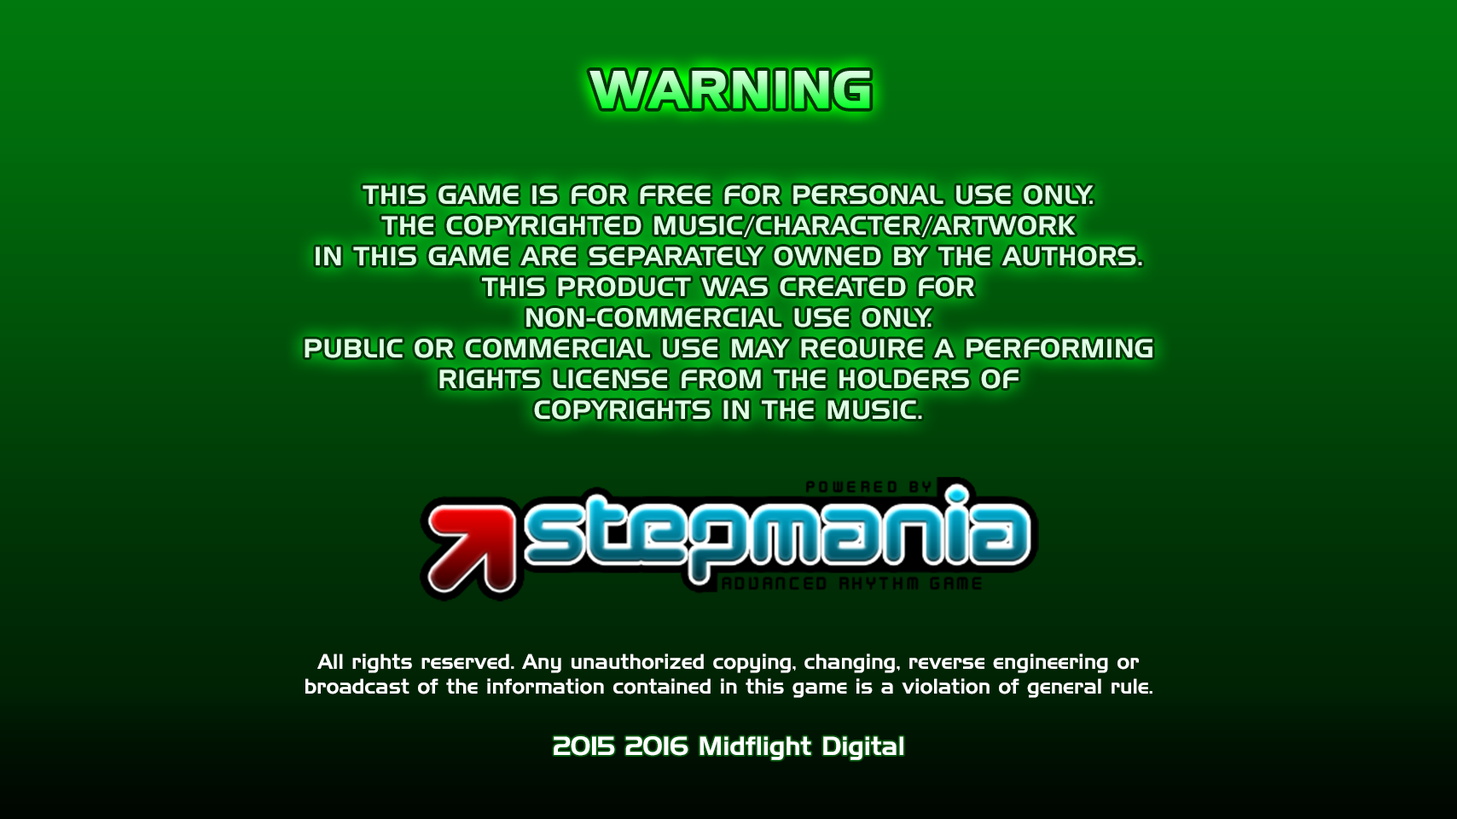
<style>
.page{position:relative;width:1457px;height:819px}
.page>*{position:absolute;margin:0}
.t1{font:51.2px "HandelGothicBT-Regular";letter-spacing:0.025em;font-weight:bold}
.t2{font:25.6px "HandelGothicBT-Regular";letter-spacing:0.025em;color:#dfffe4}
.t3{font:20.5px "HandelGothicBT-Regular";letter-spacing:0.005em;color:#ffffff}
.t4{font:25.6px "HandelGothicBT-Regular";letter-spacing:0.005em;color:#ffffff}
</style>
<div class="page">
<p class="t1" style="left:589px;top:71px;width:281px;height:37px">WARNING</p>
<p class="t2" style="left:304px;top:185px;width:848px;height:235px;text-align:center">THIS GAME IS FOR FREE FOR PERSONAL USE ONLY.<br>THE COPYRIGHTED MUSIC/CHARACTER/ARTWORK<br>IN THIS GAME ARE SEPARATELY OWNED BY THE AUTHORS.<br>THIS PRODUCT WAS CREATED FOR<br>NON-COMMERCIAL USE ONLY.<br>PUBLIC OR COMMERCIAL USE MAY REQUIRE A PERFORMING<br>RIGHTS LICENSE FROM THE HOLDERS OF<br>COPYRIGHTS IN THE MUSIC.</p>
<p class="t3" style="left:305px;top:653px;width:847px;height:45px;text-align:center">All rights reserved. Any unauthorized copying, changing, reverse engineering or<br>broadcast of the information contained in this game is a violation of general rule.</p>
<p class="t4" style="left:553px;top:736px;width:350px;height:24px">2015 2016 Midflight Digital</p>
</div>
